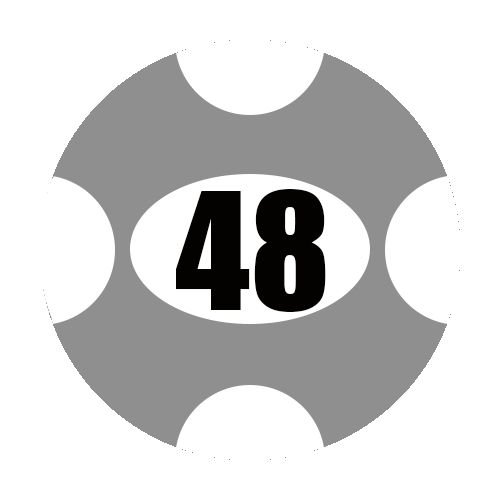
<style>
.page{position:relative;width:500px;height:500px;background:#ffffff}
.page>*{position:absolute;margin:0}
.t1{font:150px "Impact";color:#030200}
</style>
<div class="page">
<p class="t1" style="left:176px;top:189px;width:150px;height:123px">48</p>
</div>
